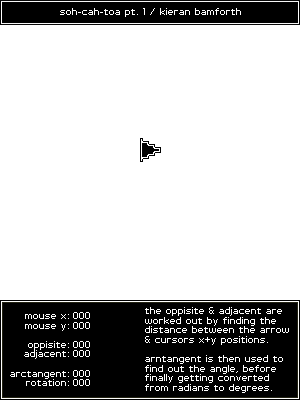
<style>
.page{position:relative;width:300px;height:400px;background:#ffffff}
.page>*{position:absolute;margin:0}
.t1{font:8px "PFTempestaSeven";color:#ffffff}
</style>
<div class="page">
<p class="t1" style="left:60px;top:8px;width:181px;height:9px">soh-cah-toa pt. 1 / kieran bamforth</p>
<p class="t1" style="left:10px;top:314px;width:59px;height:72px;text-align:right">mouse x:<br>mouse y:<br><br>oppisite:<br>adjacent:<br><br>arctangent:<br>rotation:</p>
<p class="t1" style="left:73px;top:312px;width:17px;height:7px">000</p>
<p class="t1" style="left:145px;top:307px;width:144px;height:86px">the oppisite &amp; adjacent are<br>worked out by finding the <br>distance between the arrow<br>&amp; cursors x+y positions.<br><br>arntangent is then used to<br>find out the angle, before <br>finally getting converted<br>from radians to degrees.</p>
<p class="t1" style="left:73px;top:322px;width:17px;height:7px">000</p>
<p class="t1" style="left:73px;top:341px;width:17px;height:7px">000</p>
<p class="t1" style="left:73px;top:350px;width:17px;height:7px">000</p>
<p class="t1" style="left:73px;top:370px;width:17px;height:7px">000</p>
<p class="t1" style="left:73px;top:379px;width:17px;height:7px">000</p>
</div>
